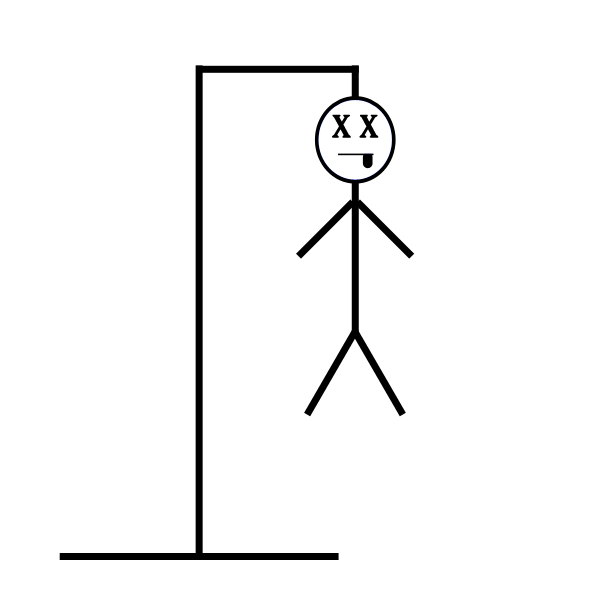
<style>
.page{position:relative;width:600px;height:600px;background:#ffffff}
.page>*{position:absolute;margin:0}
.t1{font:30px "GloucesterMT-ExtraCondensed";color:#000000;scale:1.5 1}
</style>
<div class="page">
<p class="t1" style="left:332px;top:114px;width:47px;height:24px">X X</p>
</div>
